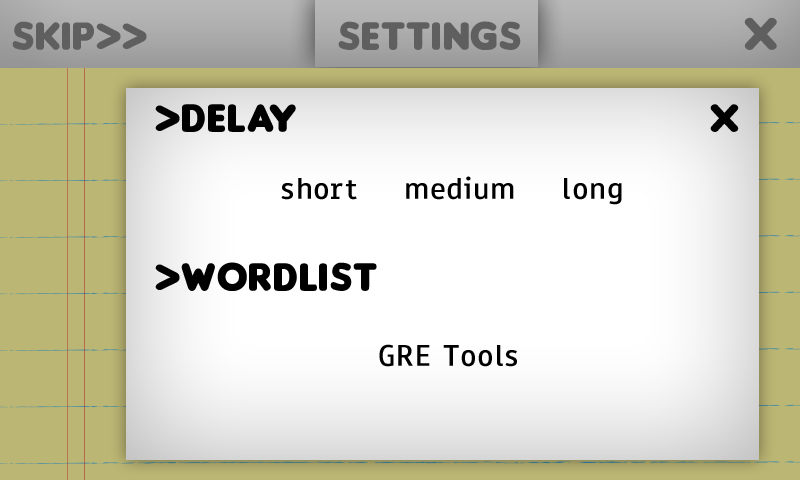
<style>
.page{position:relative;width:800px;height:480px}
.page>*{position:absolute;margin:0}
.t1{font:41.7px "Insaniburger";letter-spacing:0.025em;color:#5f5f5f}
.t2{font:48.6px "Insaniburger";letter-spacing:0.025em;color:#5f5f5f}
.t3{font:41.7px "Insaniburger";letter-spacing:0.025em;color:#000000}
.t4{font:34.7px "PaneuropaRoad";letter-spacing:0.025em;color:#000000}
</style>
<div class="page">
<p class="t1" style="left:12px;top:17px;width:765px;height:33px">skip&gt;&gt;                 sEttings                   <span class="t2">X</span></p>
<p class="t3" style="left:155px;top:104px;width:584px;height:263px">&gt;DELAY                                     X<br><br><span class="t4">short    medium    long<br><br></span>&gt;WORDLIST<br><br>                    <span class="t4">GRE Tools</span></p>
</div>
